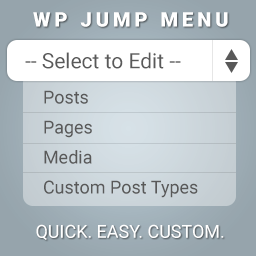
<style>
.page{position:relative;width:256px;height:256px}
.page>*{position:absolute;margin:0}
.t1{font:20px "Roboto-Black";letter-spacing:0.2em;color:#ffffff;text-transform:uppercase}
.t2{font:21px "Roboto-Regular";color:#595959}
.t3{font:18px/30px "Roboto-Regular";color:#595959}
.t4{font:18px "Roboto-Regular";color:#ffffff}
</style>
<div class="page">
<p class="t1" style="left:33px;top:12px;width:195px;height:15px">WP Jump Menu</p>
<p class="t2" style="left:25px;top:52px;width:156px;height:17px">-- Select to Edit --</p>
<p class="t3" style="left:44px;top:90px;width:154px;height:108px">Posts<br>Pages<br>Media<br>Custom Post Types</p>
<p class="t4" style="left:36px;top:224px;width:188px;height:16px">QUICK. EASY. CUSTOM.</p>
</div>
